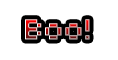
<style>
.page{position:relative;width:118px;height:60px;background:#ffffff}
.page>*{position:absolute;margin:0}
.t1{font:32px "04b03"}
</style>
<div class="page">
<p class="t1" style="left:25px;top:19px;width:65px;height:21px">Boo!</p>
<p class="t1" style="left:25px;top:19px;width:65px;height:21px">Boo!</p>
<p class="t1" style="left:25px;top:19px;width:65px;height:21px">Boo!</p>
</div>
